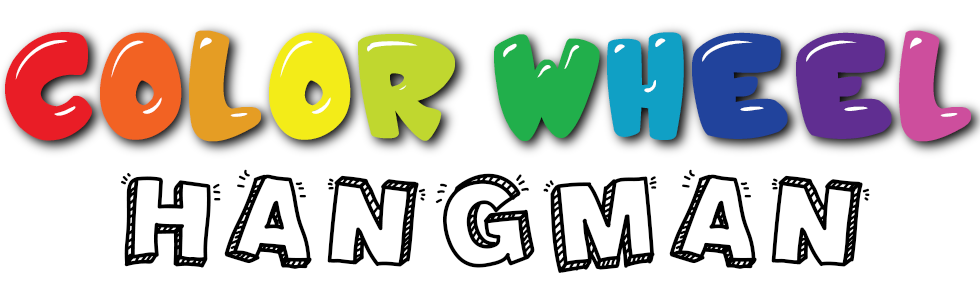
<style>
.page{position:relative;width:980px;height:299px;background:#ffffff}
.page>*{position:absolute;margin:0}
.t1{font:64.3px/258.9px "JellyCrazies";letter-spacing:0.05em;color:#e91d26;font-weight:bold}
.t2{font:64.3px/258.9px "JellyCrazies";letter-spacing:0.05em;color:#f26223;font-weight:bold}
.t3{font:64.3px/258.9px "JellyCrazies";letter-spacing:0.05em;color:#e59d24;font-weight:bold}
.t4{font:64.3px/258.9px "JellyCrazies";letter-spacing:0.05em;color:#f3ec18;font-weight:bold}
.t5{font:64.3px/258.9px "JellyCrazies";letter-spacing:0.05em;color:#c0d72f;font-weight:bold}
.t6{font:64.3px/258.9px "JellyCrazies";letter-spacing:0.05em;color:#21af4b;font-weight:bold}
.t7{font:64.3px/258.9px "JellyCrazies";letter-spacing:0.05em;color:#10a0c5;font-weight:bold}
.t8{font:64.3px/258.9px "JellyCrazies";letter-spacing:0.05em;color:#21439c;font-weight:bold}
.t9{font:64.3px/258.9px "JellyCrazies";letter-spacing:0.05em;color:#602e91;font-weight:bold}
.t10{font:64.3px/258.9px "JellyCrazies";letter-spacing:0.05em;color:#cd4e9d;font-weight:bold}
.t11{font:134.1px "PackagingFunny";letter-spacing:0.05em;color:#000000;font-weight:bold}
</style>
<div class="page">
<p class="t1" style="left:5px;top:30px;width:966px;height:112px;text-align:center">C<span class="t2">O</span><span class="t3">L</span><span class="t4">O</span><span class="t5">R </span><span class="t6">W</span><span class="t7">H</span><span class="t8">E</span><span class="t9">E</span><span class="t10">L</span></p>
<p class="t11" style="left:120px;top:169px;width:750px;height:104px">HANGMAN</p>
</div>
